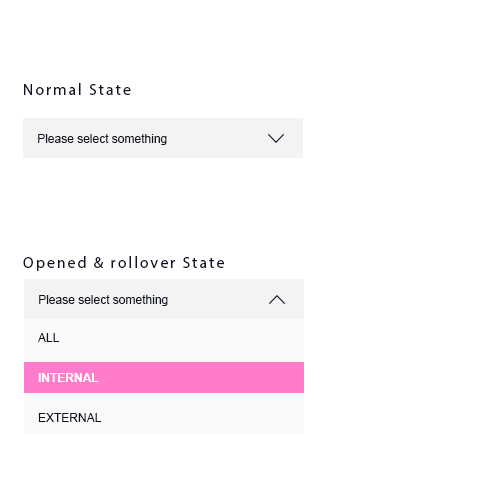
<style>
.page{position:relative;width:500px;height:500px;background:#ffffff}
.page>*{position:absolute;margin:0}
.t1{font:16px "MyriadPro-Regular";letter-spacing:0.12em;color:#101324}
.t2{font:12px "ArialMT";color:#101324}
.t3{font:12px "Arial-BoldMT";color:#ffffff}
</style>
<div class="page">
<p class="t1" style="left:24px;top:83px;width:107px;height:12px">Normal State</p>
<p class="t2" style="left:38px;top:134px;width:129px;height:11px">Please select something</p>
<p class="t1" style="left:23px;top:256px;width:201px;height:15px">Opened &amp; rollover State</p>
<p class="t2" style="left:39px;top:295px;width:129px;height:11px">Please select something</p>
<p class="t2" style="left:38px;top:333px;width:22px;height:9px">ALL</p>
<p class="t3" style="left:38px;top:373px;width:61px;height:9px">INTERNAL</p>
<p class="t2" style="left:38px;top:413px;width:64px;height:9px">EXTERNAL</p>
</div>
